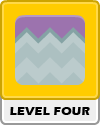
<style>
.page{position:relative;width:100px;height:125px;background:#ffcc00}
.page>*{position:absolute;margin:0}
.t1{font:12px "ErasITC-Bold";letter-spacing:0.025em;color:#000000}
</style>
<div class="page">
<p class="t1" style="left:10px;top:107px;width:80px;height:8px">LEVEL FOUR</p>
</div>
